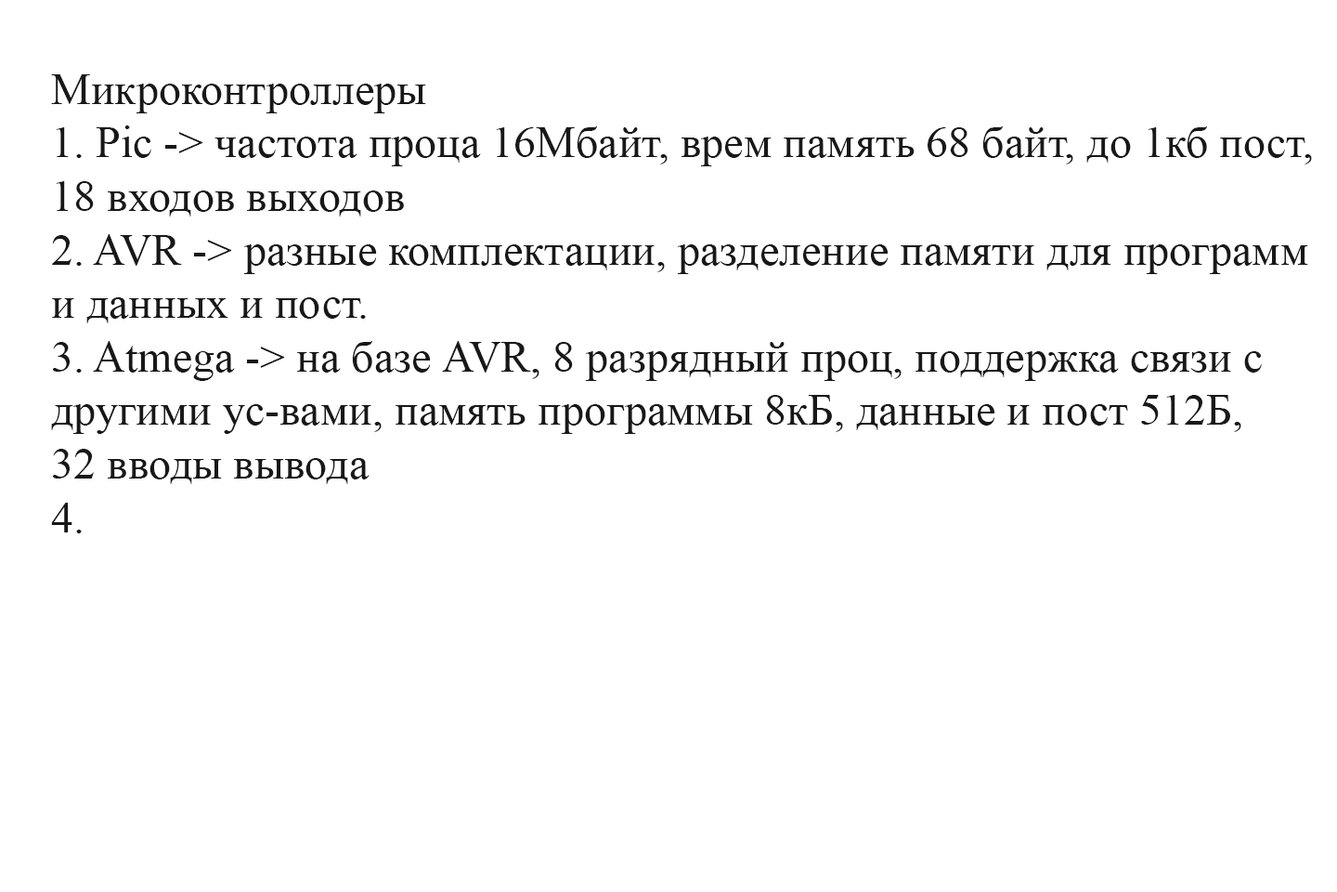
<style>
.page{position:relative;width:1337px;height:892px;background:#ffffff}
.page>*{position:absolute;margin:0}
.t1{font:44.6px "TimesNewRomanPSMT";color:#191818}
</style>
<div class="page">
<p class="t1" style="left:51px;top:74px;width:1261px;height:459px">Микроконтроллеры<br>1. Pic -&gt; частота проца 16Мбайт, врем память 68 байт, до 1кб пост,<br>18 входов выходов<br>2. AVR -&gt; разные комплектации, разделение памяти для программ <br>и данных и пост.<br>3. Atmega -&gt; на базе AVR, 8 разрядный проц, поддержка связи с <br>другими ус-вами, память программы 8кБ, данные и пост 512Б, <br>32 вводы вывода<br>4.</p>
</div>
